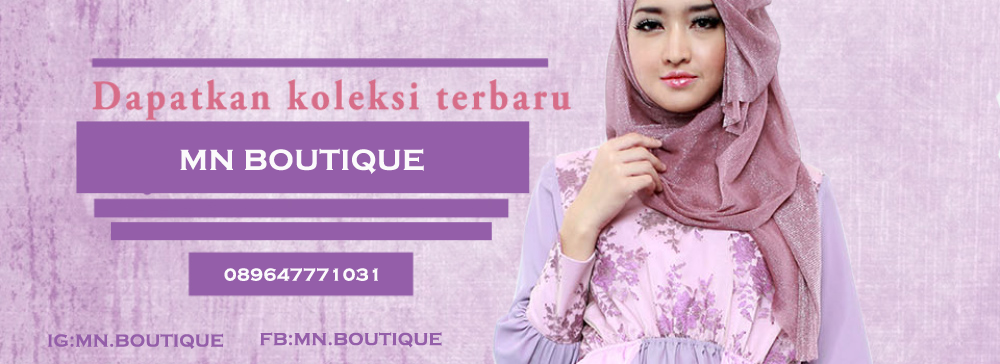
<style>
.page{position:relative;width:1000px;height:364px}
.page>*{position:absolute;margin:0}
.t1{font:30px "CopperplateGothic-Bold";letter-spacing:0.02em;color:#fbfafb}
.t2{font:18px "CopperplateGothic-Bold";letter-spacing:0.02em;color:#fbfafb}
.t3{font:18px "CopperplateGothic-Bold";letter-spacing:0.02em;color:#945ea9}
</style>
<div class="page">
<p class="t1" style="left:180px;top:148px;width:244px;height:26px">MN BOUTIQUE</p>
<p class="t2" style="left:224px;top:268px;width:154px;height:13px">089647771031</p>
<p class="t3" style="left:48px;top:333px;width:175px;height:16px">IG:MN.BOUTIQUE</p>
<p class="t3" style="left:260px;top:332px;width:182px;height:16px">FB:MN.BOUTIQUE</p>
</div>
